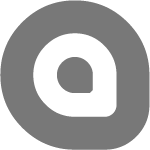
<style>
.page{position:relative;width:150px;height:150px;background:#787878}
.page>*{position:absolute;margin:0}
.t1{font:230px "PicoWhiteAl";color:#787878;font-weight:bold}
</style>
<div class="page">
<p class="t1" style="left:0px;top:0px;width:150px;height:150px">A</p>
</div>
